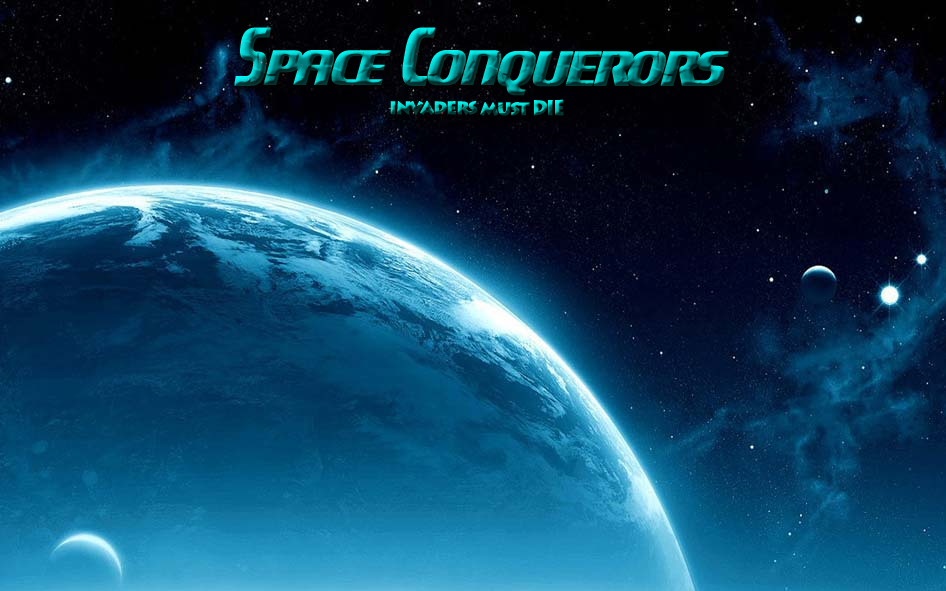
<style>
.page{position:relative;width:946px;height:591px}
.page>*{position:absolute;margin:0}
.t1{font:21px/30px "LithosPro-Black";letter-spacing:-0.075em;font-variant:small-caps;font-weight:bold;scale:0.87 1}
.t2{font:127.4px/30px "Motorwerk";letter-spacing:-0.075em;font-variant:small-caps;font-weight:bold;scale:0.52 1}
.t3{font:76.5px/30px "Motorwerk";letter-spacing:-0.075em;font-variant:small-caps;font-weight:bold;scale:0.87 1}
</style>
<div class="page">
<p class="t1" style="left:234px;top:27px;width:495px;height:89px;text-align:center"><span class="t2">S</span><span class="t3">PACE </span><span class="t2">C</span><span class="t3">ONQUERORS <br></span>invaders must DIE</p>
</div>
